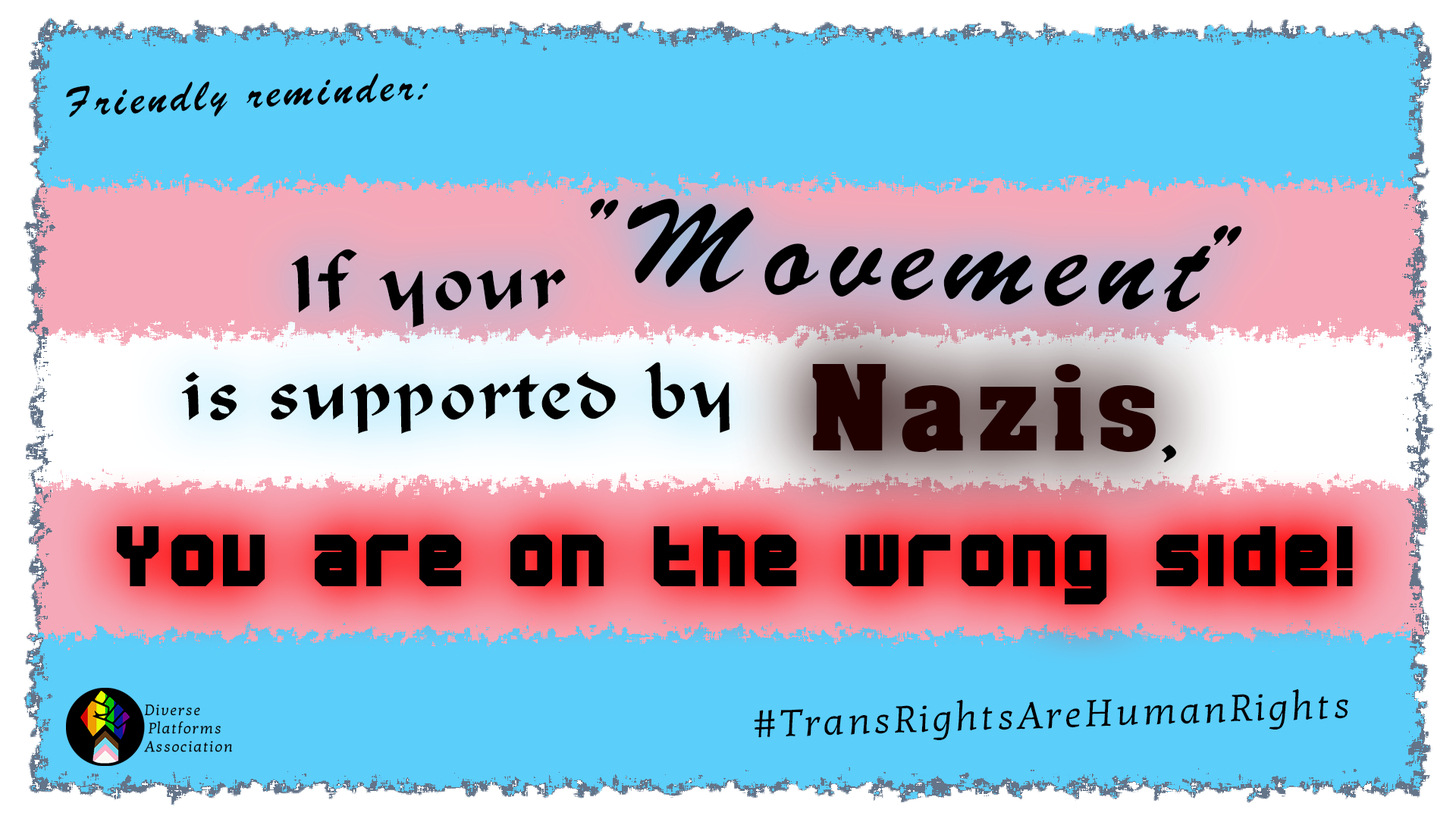
<style>
.page{position:relative;width:1456px;height:819px;background:#5bcefa}
.page>*{position:absolute;margin:0}
.t1{font:37.9px "Brussels";letter-spacing:0.075em;color:#000000}
.t2{font:113.7px "Brussels";letter-spacing:0.075em;color:#000000}
.t3{font:75.8px "Calligraphic";letter-spacing:0.075em;color:#000000}
.t4{font:68.2px "Calligraphic";letter-spacing:0.075em;color:#000000}
.t5{font:113.7px "AcmeFont";letter-spacing:0.075em;color:#210000}
.t6{font:83.4px "BNMachine";letter-spacing:0.075em;color:#000000}
.t7{font:38.3px "KottaOne-Regular";letter-spacing:0.075em;color:#000000}
</style>
<div class="page">
<p class="t1" style="left:66px;top:73px;width:362px;height:45px;rotate:-3deg">Friendly reminder:</p>
<p class="t2" style="left:590px;top:199px;width:652px;height:113px;rotate:2deg">"Movement"</p>
<p class="t3" style="left:291px;top:249px;width:275px;height:79px;rotate:-1deg">If your</p>
<p class="t4" style="left:181px;top:362px;width:549px;height:72px">is supported by</p>
<p class="t5" style="left:812px;top:364px;width:344px;height:88px">Nazis</p>
<p class="t3" style="left:1161px;top:444px;width:15px;height:19px">,</p>
<p class="t6" style="left:117px;top:526px;width:1236px;height:78px">You are on the wrong side!</p>
<p class="t7" style="left:754px;top:689px;width:594px;height:51px;rotate:-2deg">#TransRightsAreHumanRights</p>
</div>
